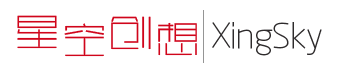
<style>
.page{position:relative;width:340px;height:70px;background:#ffffff}
.page>*{position:absolute;margin:0}
.t1{font:45.7px "FZXTHJW--GB1-0";letter-spacing:0.08em;color:#d0051b}
.t2{font:45.7px "FZXTHJW--GB1-0";color:#d0051b}
.t3{font:45px "FZXTHJW--GB1-0";color:#d0051b}
.t4{font:36.6px "RTWSYueGoTrial-ExLight";letter-spacing:-0.02em;color:#2e2b2c}
</style>
<div class="page">
<p class="t1" style="left:17px;top:15px;width:40px;height:34px">星</p>
<p class="t2" style="left:111px;top:16px;width:40px;height:34px">创</p>
<p class="t3" style="left:64px;top:23px;width:40px;height:34px">空</p>
<p class="t3" style="left:158px;top:22px;width:39px;height:34px">想</p>
<p class="t4" style="left:212px;top:22px;width:110px;height:34px">XingSky</p>
</div>
